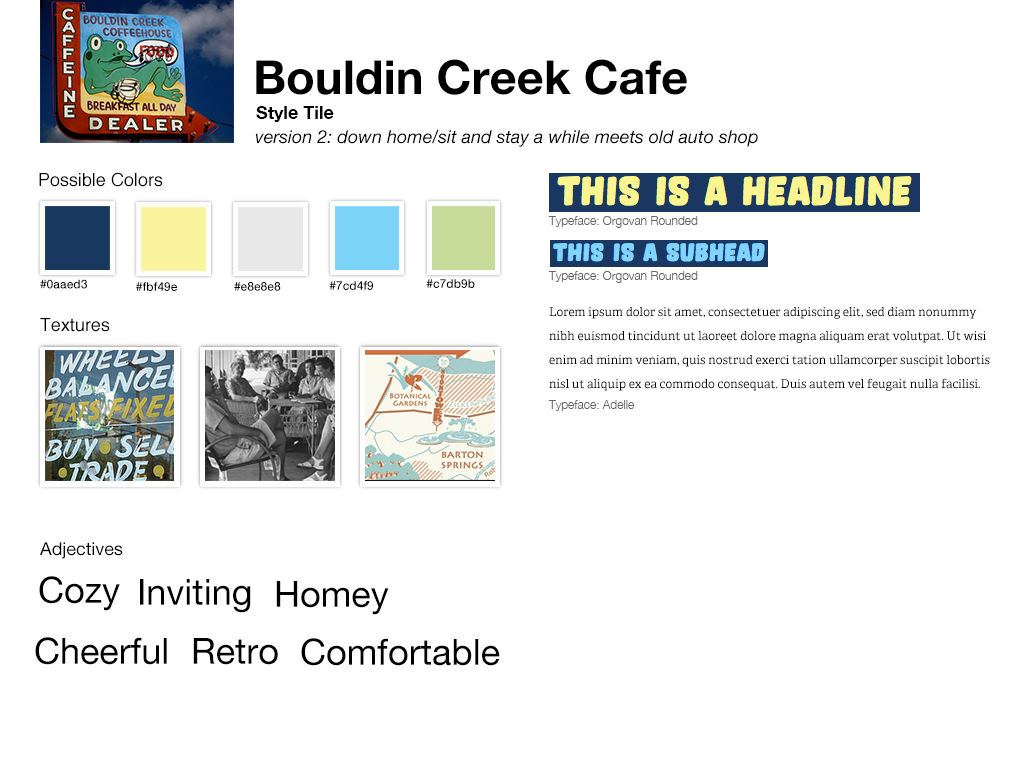
<style>
.page{position:relative;width:1020px;height:760px;background:#ffffff}
.page>*{position:absolute;margin:0}
.t1{font:47px "HelveticaNeue-Bold";color:#000000}
.t2{font:18px "HelveticaNeue-Bold";color:#000000}
.t3{font:18px "HelveticaNeue-Italic";color:#000000}
.t4{font:18px "Helvetica";color:#000000}
.t5{font:12px "HelveticaNeue-Light";color:#666666}
.t6{font:12px "HelveticaNeue-Medium";color:#000000}
.t7{font:12px/24px "Adelle-Regular";color:#000000}
.t8{font:18px "HelveticaNeue";color:#000000}
.t9{font:36px "HelveticaNeue";color:#000000}
</style>
<div class="page">
<p class="t1" style="left:256px;top:59px;width:431px;height:36px">Bouldin Creek Cafe</p>
<p class="t2" style="left:256px;top:106px;width:78px;height:16px">Style Tile</p>
<p class="t3" style="left:255px;top:129px;width:503px;height:18px">version 2: down home/sit and stay a while meets old auto shop</p>
<p class="t4" style="left:39px;top:172px;width:124px;height:15px">Possible Colors</p>
<p class="t5" style="left:548px;top:216px;width:150px;height:12px">Typeface: Orgovan Rounded</p>
<p class="t6" style="left:40px;top:279px;width:47px;height:10px">#0aaed3</p>
<p class="t6" style="left:329px;top:281px;width:44px;height:9px">#7cd4f9</p>
<p class="t6" style="left:426px;top:279px;width:49px;height:9px">#c7db9b</p>
<p class="t5" style="left:548px;top:271px;width:150px;height:12px">Typeface: Orgovan Rounded</p>
<p class="t6" style="left:136px;top:282px;width:41px;height:9px">#fbf49e</p>
<p class="t6" style="left:234px;top:282px;width:47px;height:9px">#e8e8e8</p>
<p class="t4" style="left:40px;top:318px;width:70px;height:14px">Textures</p>
<p class="t7" style="left:549px;top:307px;width:441px;height:84px">Lorem ipsum dolor sit amet, consectetuer adipiscing elit, sed diam nonummy nibh euismod tincidunt ut laoreet dolore magna aliquam erat volutpat. Ut wisi enim ad minim veniam, quis nostrud exerci tation ullamcorper suscipit lobortis nisl ut aliquip ex ea commodo consequat. Duis autem vel feugait nulla facilisi.</p>
<p class="t5" style="left:548px;top:400px;width:86px;height:11px">Typeface: Adelle</p>
<p class="t8" style="left:40px;top:542px;width:83px;height:17px">Adjectives</p>
<p class="t9" style="left:39px;top:576px;width:81px;height:35px">Cozy</p>
<p class="t9" style="left:140px;top:579px;width:111px;height:34px">Inviting</p>
<p class="t9" style="left:276px;top:581px;width:113px;height:34px">Homey</p>
<p class="t9" style="left:35px;top:637px;width:132px;height:28px">Cheerful</p>
<p class="t9" style="left:193px;top:638px;width:85px;height:27px">Retro</p>
<p class="t9" style="left:301px;top:638px;width:199px;height:28px">Comfortable</p>
</div>
